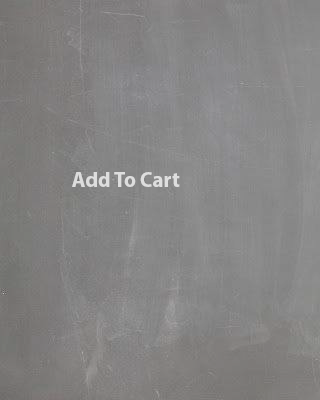
<style>
.page{position:relative;width:320px;height:400px}
.page>*{position:absolute;margin:0}
.t1{font:21px "MyriadPro-Bold";color:#dedede}
</style>
<div class="page">
<p class="t1" style="left:72px;top:172px;width:108px;height:15px">Add To Cart</p>
</div>
